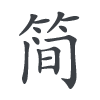
<style>
.page{position:relative;width:100px;height:100px;background:#ffffff}
.page>*{position:absolute;margin:0}
.t1{font:90px "STKaiti-SC-Regular";color:#3c4045}
</style>
<div class="page">
<p class="t1" style="left:19px;top:11px;width:61px;height:78px">简</p>
</div>
